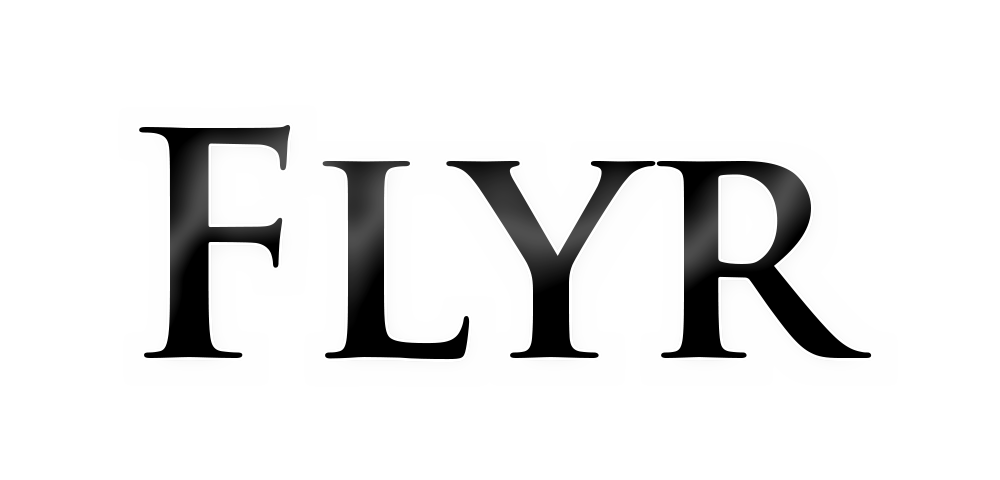
<style>
.page{position:relative;width:1000px;height:480px;background:#ffffff}
.page>*{position:absolute;margin:0}
.t1{font:305.6px "TrajanPro-Bold";color:#000000}
</style>
<div class="page">
<p class="t1" style="left:139px;top:125px;width:733px;height:235px">Flyr</p>
</div>
